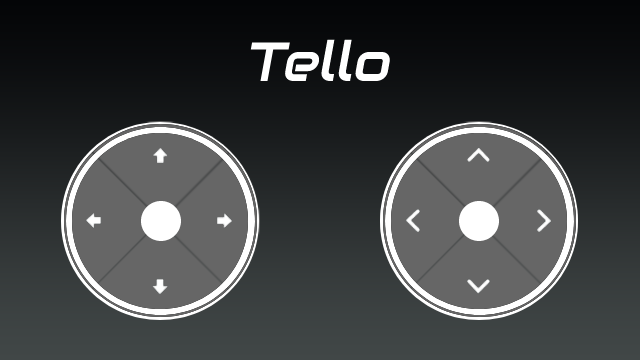
<style>
.page{position:relative;width:640px;height:360px}
.page>*{position:absolute;margin:0}
.t1{font:55px "Audiowide-Regular";color:#ffffff;font-style:italic}
</style>
<div class="page">
<p class="t1" style="left:250px;top:39px;width:140px;height:42px">Tello</p>
</div>
